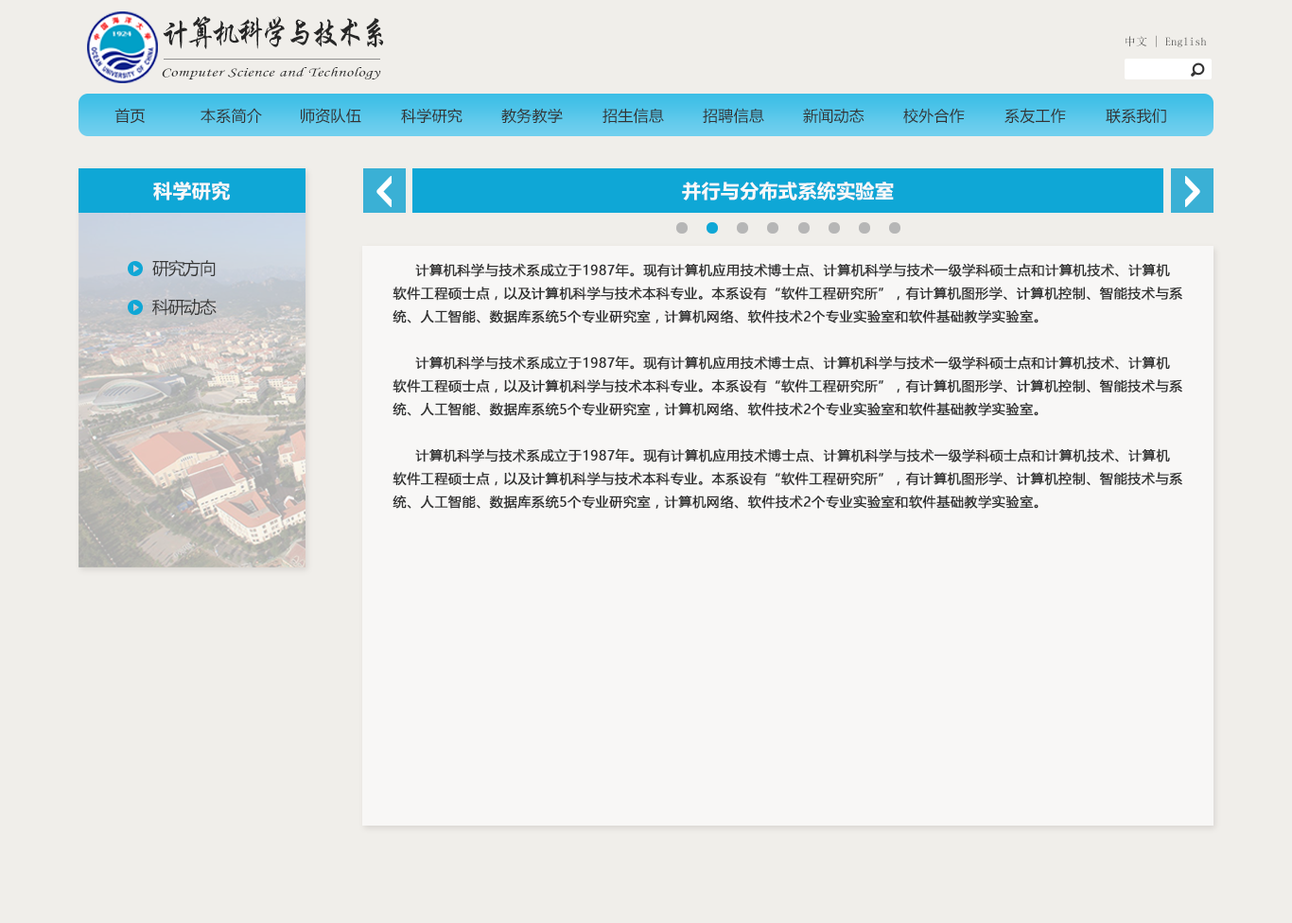
<style>
.page{position:relative;width:1292px;height:923px;background:#f0eeea}
.page>*{position:absolute;margin:0}
.t1{font:32.9px "STXingkai";letter-spacing:-0.14em;color:#272727;scale:0.88 1}
.t2{font:11.3px "SimSun";letter-spacing:0.02em}
.t3{font:13px "STLiti";letter-spacing:0.02em;color:#272727;scale:1.34 1}
.t4{font:15.1px "MicrosoftYaHei";letter-spacing:0.02em;color:#333333}
.t5{font:18.9px "MicrosoftYaHei-Bold";letter-spacing:0.02em;color:#f9f9f9}
.t6{font:17px "MicrosoftYaHei";letter-spacing:-0.076em;color:#383838}
.t7{font:13.2px "MicrosoftYaHei";letter-spacing:0.02em;color:#333333;font-weight:bold}
</style>
<div class="page">
<p class="t1" style="left:163px;top:16px;width:221px;height:33px">计算机科学与技术系</p>
<p class="t2" style="left:1125px;top:35px;width:82px;height:12px">中文 | English</p>
<p class="t3" style="left:162px;top:67px;width:219px;height:12px">Computer Science and Technology</p>
<p class="t4" style="left:114px;top:108px;width:31px;height:16px">首页</p>
<p class="t4" style="left:200px;top:108px;width:62px;height:16px">本系简介</p>
<p class="t4" style="left:301px;top:108px;width:60px;height:16px">师资队伍</p>
<p class="t4" style="left:401px;top:108px;width:61px;height:16px">科学研究</p>
<p class="t4" style="left:501px;top:108px;width:62px;height:16px">教务教学</p>
<p class="t4" style="left:602px;top:108px;width:62px;height:16px">招生信息</p>
<p class="t4" style="left:703px;top:108px;width:61px;height:16px">招聘信息</p>
<p class="t4" style="left:803px;top:108px;width:61px;height:16px">新闻动态</p>
<p class="t4" style="left:903px;top:108px;width:62px;height:16px">校外合作</p>
<p class="t4" style="left:1004px;top:108px;width:62px;height:16px">系友工作</p>
<p class="t4" style="left:1106px;top:108px;width:60px;height:16px">联系我们</p>
<p class="t5" style="left:153px;top:182px;width:77px;height:18px">科学研究</p>
<p class="t5" style="left:682px;top:182px;width:212px;height:18px">并行与分布式系统实验室</p>
<p class="t6" style="left:152px;top:260px;width:64px;height:17px">研究方向</p>
<p class="t7" style="left:392px;top:263px;width:790px;height:246px">计算机科学与技术系成立于1987年。现有计算机应用技术博士点、计算机科学与技术一级学科硕士点和计算机技术、计算机软件工程硕士点，以及计算机科学与技术本科专业。本系设有“软件工程研究所”，有计算机图形学、计算机控制、智能技术与系统、人工智能、数据库系统5个专业研究室，计算机网络、软件技术2个专业实验室和软件基础教学实验室。<br><br>     计算机科学与技术系成立于1987年。现有计算机应用技术博士点、计算机科学与技术一级学科硕士点和计算机技术、计算机软件工程硕士点，以及计算机科学与技术本科专业。本系设有“软件工程研究所”，有计算机图形学、计算机控制、智能技术与系统、人工智能、数据库系统5个专业研究室，计算机网络、软件技术2个专业实验室和软件基础教学实验室。<br><br>     计算机科学与技术系成立于1987年。现有计算机应用技术博士点、计算机科学与技术一级学科硕士点和计算机技术、计算机软件工程硕士点，以及计算机科学与技术本科专业。本系设有“软件工程研究所”，有计算机图形学、计算机控制、智能技术与系统、人工智能、数据库系统5个专业研究室，计算机网络、软件技术2个专业实验室和软件基础教学实验室。</p>
<p class="t6" style="left:152px;top:299px;width:65px;height:17px">科研动态</p>
</div>
